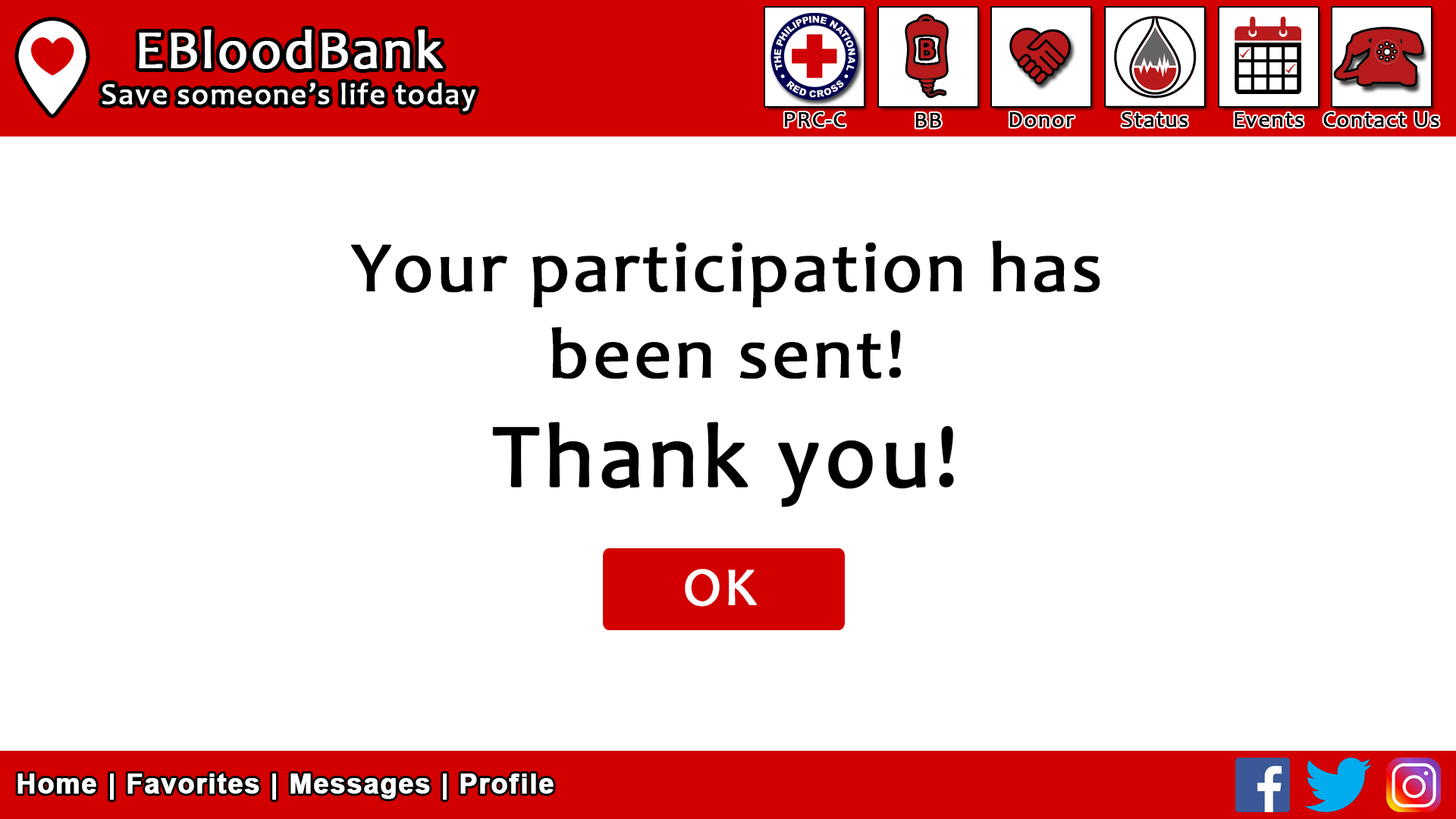
<style>
.page{position:relative;width:1456px;height:819px;background:#ffffff}
.page>*{position:absolute;margin:0}
.t1{font:30.3px "Candara";letter-spacing:0.03em;color:#ffffff;font-weight:bold}
.t2{font:54.6px "Candara";letter-spacing:0.03em;color:#ffffff;font-weight:bold}
.t3{font:22.7px "Candara";letter-spacing:0.03em;color:#000000;font-weight:bold}
.t4{font:72px "Candara";letter-spacing:0.03em;color:#000000;font-weight:bold}
.t5{font:91px "Candara";letter-spacing:0.03em;color:#000000;font-weight:bold}
.t6{font:54.3px "Candara";letter-spacing:0.03em;color:#ffffff;font-weight:bold}
.t7{font:27.3px "Arial-BoldMT";letter-spacing:0.03em;color:#ffffff;font-weight:bold}
</style>
<div class="page">
<p class="t1" style="left:102px;top:30px;width:373px;height:81px;text-align:center"><span class="t2">EBloodBank<br></span>Save someone’s life today</p>
<p class="t3" style="left:784px;top:112px;width:62px;height:15px">PRC-C</p>
<p class="t3" style="left:915px;top:113px;width:26px;height:15px">BB</p>
<p class="t3" style="left:1009px;top:112px;width:66px;height:15px">Donor</p>
<p class="t3" style="left:1122px;top:112px;width:66px;height:15px">Status</p>
<p class="t3" style="left:1235px;top:112px;width:69px;height:15px">Events</p>
<p class="t3" style="left:1323px;top:112px;width:116px;height:15px">Contact Us</p>
<p class="t4" style="left:351px;top:240px;width:749px;height:267px;text-align:center">Your participation has<br>been sent!<br><span class="t5">Thank you!</span></p>
<p class="t6" style="left:685px;top:569px;width:72px;height:38px">OK</p>
<p class="t7" style="left:17px;top:773px;width:537px;height:27px">Home | Favorites | Messages | Profile</p>
</div>
